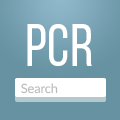
<style>
.page{position:relative;width:120px;height:120px;background:#6692a1}
.page>*{position:absolute;margin:0}
.t1{font:58.9px "BebasNeueRegular";color:#ffffff}
.t2{font:12.6px "Lato-Regular";color:#bbbbbb}
</style>
<div class="page">
<p class="t1" style="left:27px;top:24px;width:65px;height:42px">PCR</p>
<p class="t2" style="left:21px;top:83px;width:37px;height:11px">Search</p>
</div>
